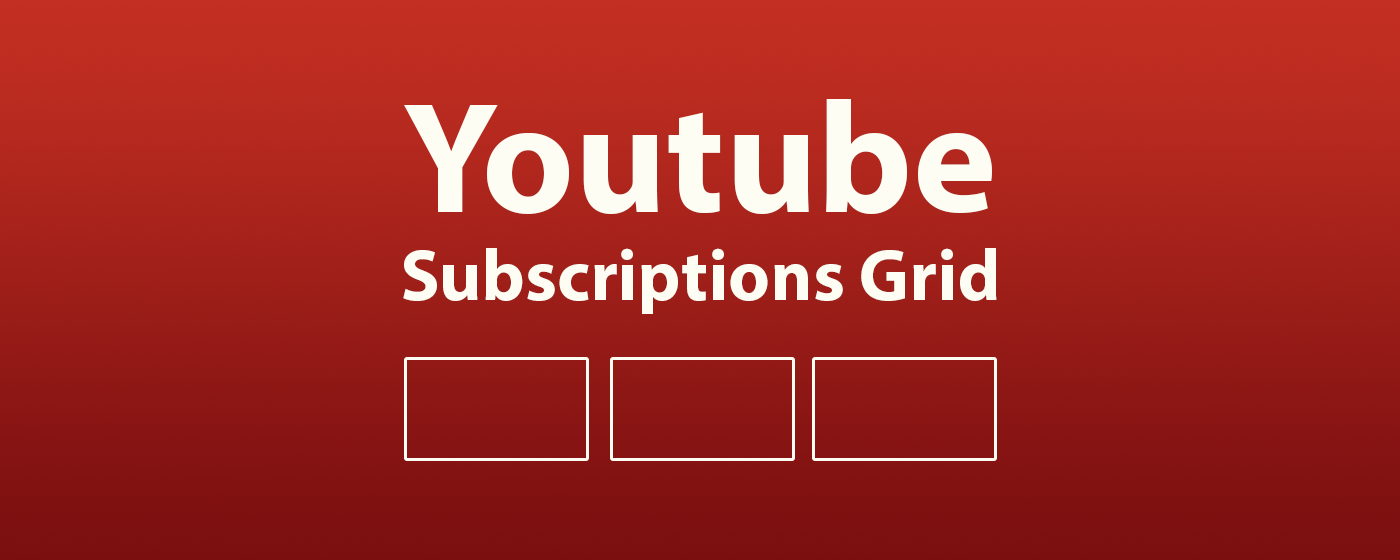
<style>
.page{position:relative;width:1400px;height:560px}
.page>*{position:absolute;margin:0}
.t1{font:73px/88px "MyriadPro-Bold";color:#fdfdf4}
.t2{font:159px/88px "MyriadPro-Bold";color:#fdfdf4}
</style>
<div class="page">
<p class="t1" style="left:403px;top:99px;width:594px;height:215px;text-align:center"><span class="t2">Youtube <br></span>Subscriptions Grid</p>
</div>
